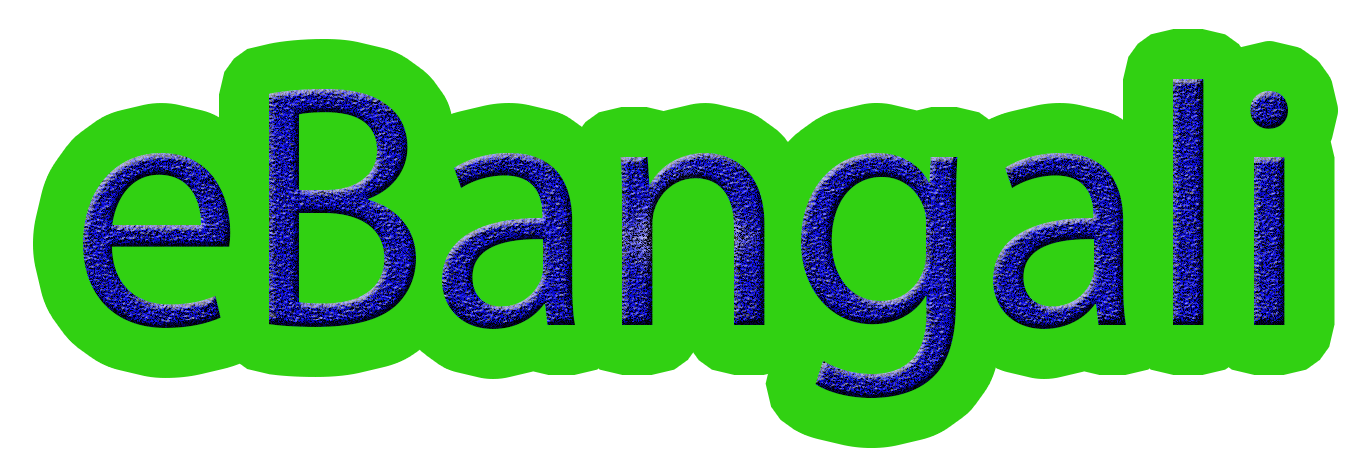
<style>
.page{position:relative;width:1366px;height:470px;background:#31d112}
.page>*{position:absolute;margin:0}
.t1{font:346.8px "MyriadPro-Regular"}
</style>
<div class="page">
<p class="t1" style="left:83px;top:79px;width:1205px;height:319px">eBangali</p>
</div>
